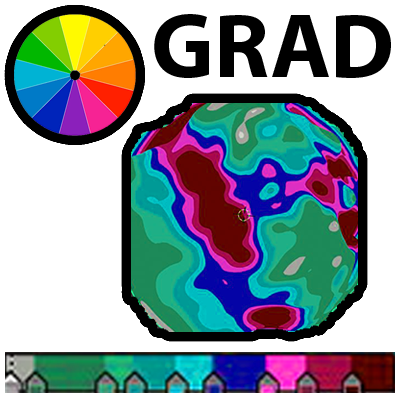
<style>
.page{position:relative;width:400px;height:400px;background:#ffffff}
.page>*{position:absolute;margin:0}
.t1{font:92.5px "MyriadPro-Bold";color:#000000}
</style>
<div class="page">
<p class="t1" style="left:154px;top:14px;width:237px;height:64px">GRAD</p>
</div>
